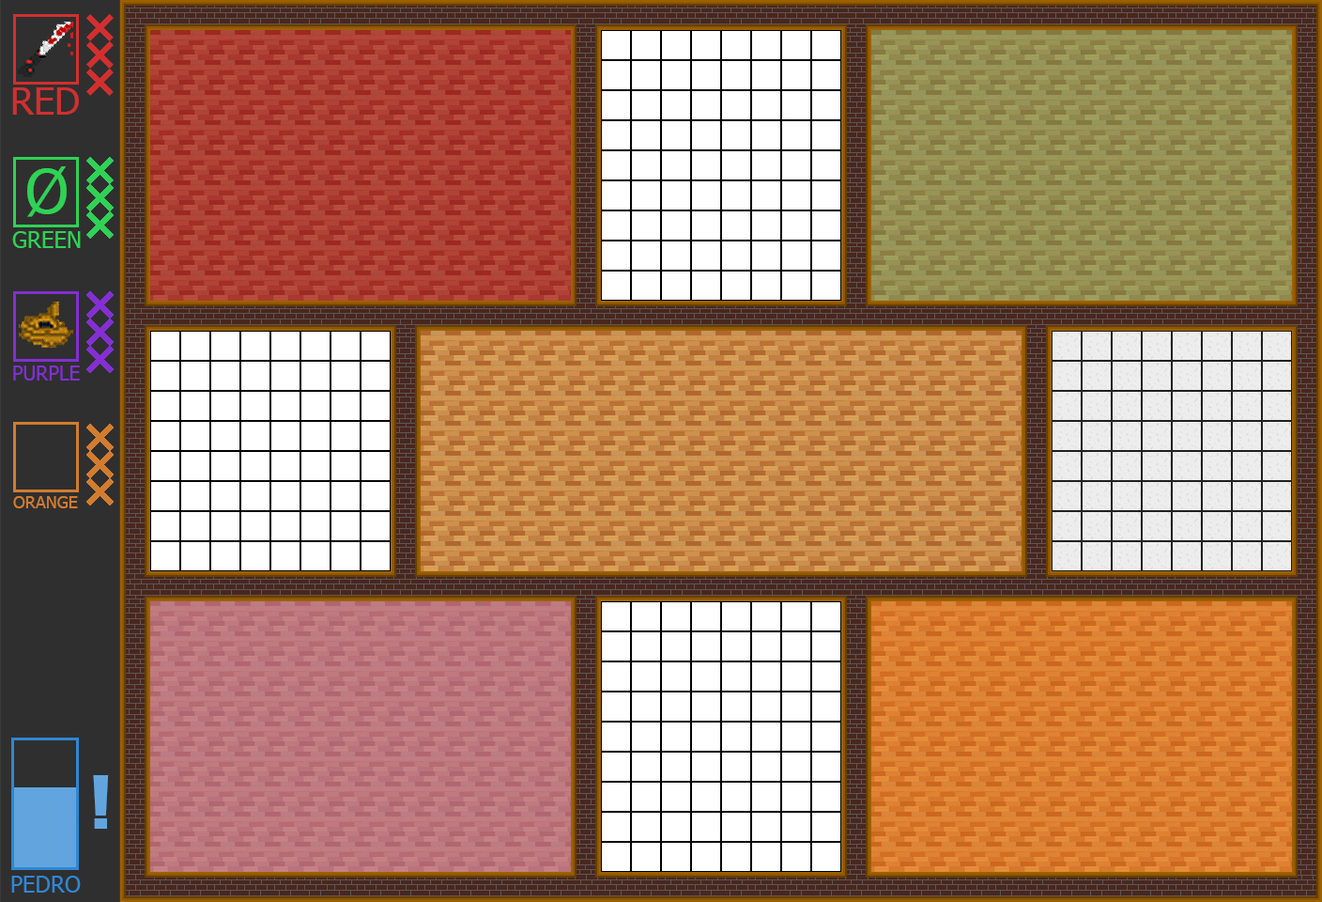
<style>
.page{position:relative;width:1322px;height:902px}
.page>*{position:absolute;margin:0}
.t1{font:37.6px "Tahoma";color:#d22f2f}
.t2{font:61.1px "Tahoma";color:#2fd255}
.t3{font:22.5px "Tahoma";color:#2fd255}
.t4{font:19.7px "Tahoma";color:#832fd2}
.t5{font:16.9px "Tahoma";color:#d27c2f}
.t6{font:67.6px "Impact";color:#62a5de}
.t7{font:22.5px "Tahoma";color:#2f87d2}
</style>
<div class="page">
<p class="t1" style="left:12px;top:87px;width:67px;height:28px">RED</p>
<p class="t2" style="left:27px;top:166px;width:40px;height:51px">Ø</p>
<p class="t3" style="left:12px;top:231px;width:69px;height:17px">GREEN</p>
<p class="t4" style="left:13px;top:365px;width:67px;height:15px">PURPLE</p>
<p class="t5" style="left:13px;top:496px;width:65px;height:12px">ORANGE</p>
<p class="t6" style="left:93px;top:775px;width:16px;height:53px">!</p>
<p class="t7" style="left:11px;top:875px;width:70px;height:17px">PEDRO</p>
</div>
